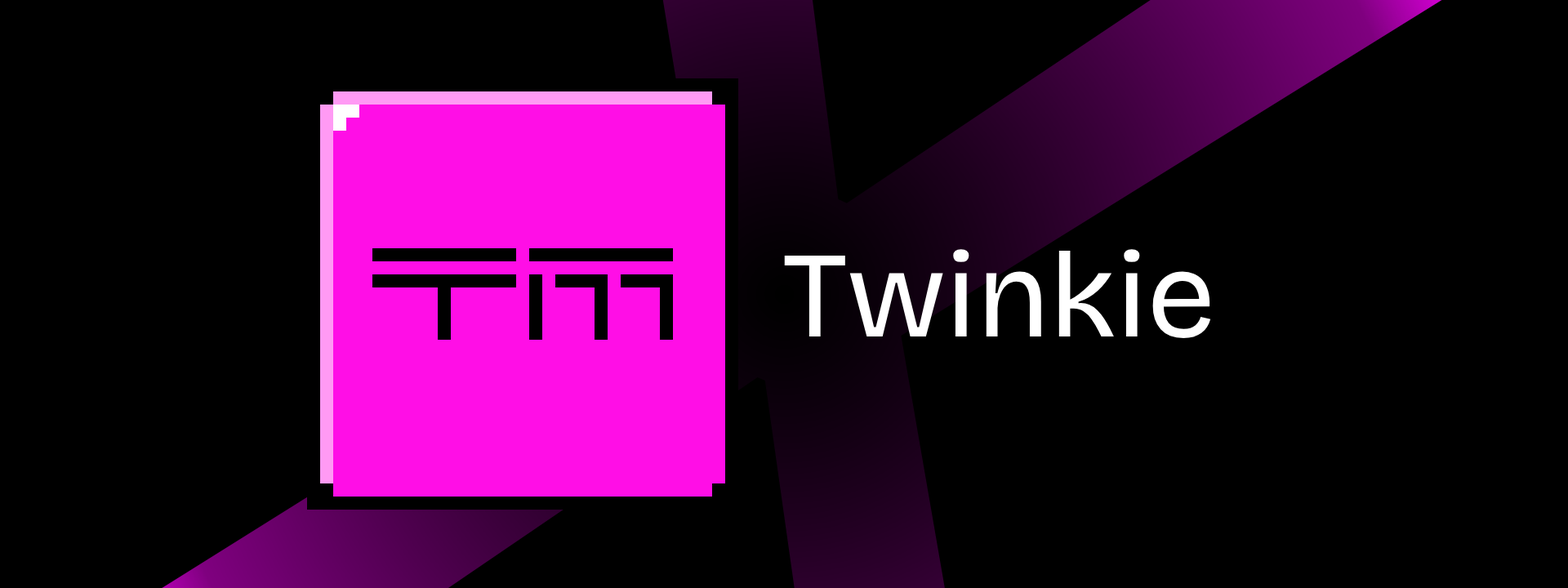
<style>
.page{position:relative;width:1568px;height:588px;background:#000000}
.page>*{position:absolute;margin:0}
.t1{font:122.5px "BricolageGrotesque-Regular";color:#ffffff}
</style>
<div class="page">
<p class="t1" style="left:784px;top:249px;width:427px;height:89px">Twinkie</p>
</div>
